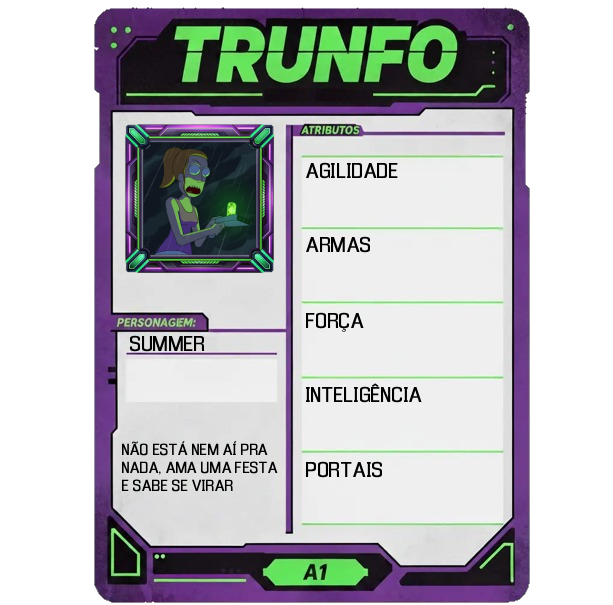
<style>
.page{position:relative;width:613px;height:605px;background:#ffffff}
.page>*{position:absolute;margin:0}
.t1{font:20px "Enigmatic";color:#000000}
.t2{font:15px "Enigmatic";color:#000000}
</style>
<div class="page">
<p class="t1" style="left:306px;top:162px;width:92px;height:17px">AGILIDADE</p>
<p class="t1" style="left:306px;top:236px;width:64px;height:17px">ARMAS</p>
<p class="t1" style="left:306px;top:312px;width:58px;height:20px">FORÇA</p>
<p class="t1" style="left:130px;top:335px;width:75px;height:17px">SUMMER</p>
<p class="t1" style="left:306px;top:383px;width:116px;height:20px">INTELIGÊNCIA</p>
<p class="t2" style="left:122px;top:441px;width:156px;height:51px">NÃO ESTÁ NEM AÍ PRA<br>NADA, AMA UMA FESTA<br>E SABE SE VIRAR</p>
<p class="t1" style="left:305px;top:461px;width:77px;height:17px">PORTAIS</p>
</div>
